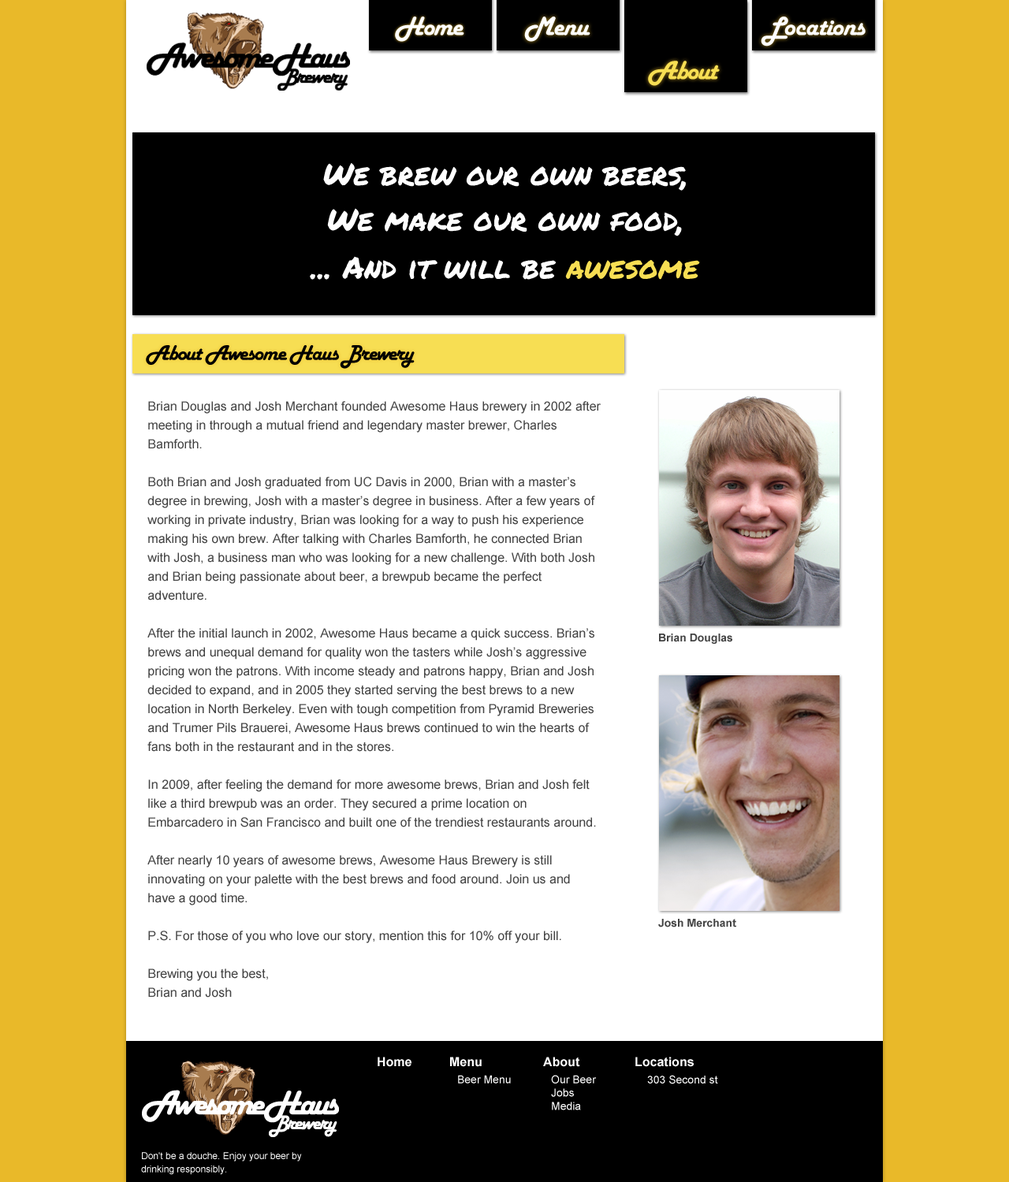
<style>
.page{position:relative;width:1009px;height:1182px;background:#ffffff}
.page>*{position:absolute;margin:0}
.t1{font:27.6px "HarlowSolid";letter-spacing:-0.04em;color:#ffffff}
.t2{font:27.6px "HarlowSolid";letter-spacing:-0.04em;color:#f7de53}
.t3{font:30.4px "PermanentMarker";color:#ffffff}
.t4{font:30.4px "PermanentMarker";color:#f7de53}
.t5{font:22.1px "HarlowSolid";letter-spacing:-0.04em;color:#000000}
.t6{font:12.6px/18.9px "ArialMT";color:#444444}
.t7{font:11px "Arial-BoldMT";color:#444444}
.t8{font:12.6px "Arial-BoldMT";color:#ffffff}
.t9{font:11px "ArialMT";color:#ffffff}
.t10{font:9.5px/13.2px "ArialMT";color:#ffffff}
</style>
<div class="page">
<p class="t1" style="left:395px;top:17px;width:69px;height:25px">Home</p>
<p class="t1" style="left:524px;top:17px;width:66px;height:25px">Menu</p>
<p class="t1" style="left:760px;top:17px;width:105px;height:29px">Locations</p>
<p class="t2" style="left:648px;top:61px;width:72px;height:25px">About</p>
<p class="t3" style="left:323px;top:162px;width:363px;height:29px">We brew our own beers,</p>
<p class="t3" style="left:327px;top:208px;width:355px;height:28px">We make our own food,</p>
<p class="t3" style="left:310px;top:256px;width:390px;height:24px">... And it will be <span class="t4">awesome</span></p>
<p class="t5" style="left:146px;top:345px;width:269px;height:24px">About Awesome Haus Brewery</p>
<p class="t6" style="left:147px;top:401px;width:454px;height:597px">Brian Douglas and Josh Merchant founded Awesome Haus brewery in 2002 after meeting in through a mutual friend and legendary master brewer, Charles Bamforth.<br><br>Both Brian and Josh graduated from UC Davis in 2000, Brian with a master’s degree in brewing, Josh with a master’s degree in business. After a few years of working in private industry, Brian was looking for a way to push his experience making his own brew. After talking with Charles Bamforth, he connected Brian with Josh, a business man who was looking for a new challenge. With both Josh and Brian being passionate about beer, a brewpub became the perfect adventure.<br><br>After the initial launch in 2002, Awesome Haus became a quick success. Brian’s brews and unequal demand for quality won the tasters while Josh’s aggressive pricing won the patrons. With income steady and patrons happy, Brian and Josh decided to expand, and in 2005 they started serving the best brews to a new location in North Berkeley. Even with tough competition from Pyramid Breweries and Trumer Pils Brauerei, Awesome Haus brews continued to win the hearts of fans both in the restaurant and in the stores.<br><br>In 2009, after feeling the demand for more awesome brews, Brian and Josh felt like a third brewpub was an order. They secured a prime location on Embarcadero in San Francisco and built one of the trendiest restaurants around.<br><br>After nearly 10 years of awesome brews, Awesome Haus Brewery is still innovating on your palette with the best brews and food around. Join us and have a good time.<br><br>P.S. For those of you who love our story, mention this for 10% off your bill.<br><br>Brewing you the best,<br>Brian and Josh</p>
<p class="t7" style="left:659px;top:634px;width:73px;height:10px">Brian Douglas</p>
<p class="t7" style="left:658px;top:919px;width:78px;height:9px">Josh Merchant</p>
<p class="t8" style="left:377px;top:1057px;width:34px;height:10px">Home</p>
<p class="t9" style="left:450px;top:1057px;width:61px;height:27px"><span class="t8">Menu<br></span>Beer Menu</p>
<p class="t9" style="left:543px;top:1057px;width:54px;height:53px"><span class="t8">About<br></span>Our Beer<br>Jobs<br>Media</p>
<p class="t8" style="left:635px;top:1057px;width:59px;height:10px">Locations</p>
<p class="t9" style="left:647px;top:1075px;width:71px;height:9px">303 Second st</p>
<p class="t10" style="left:141px;top:1152px;width:161px;height:23px">Don't be a douche. Enjoy your beer by drinking responsibly.</p>
</div>
